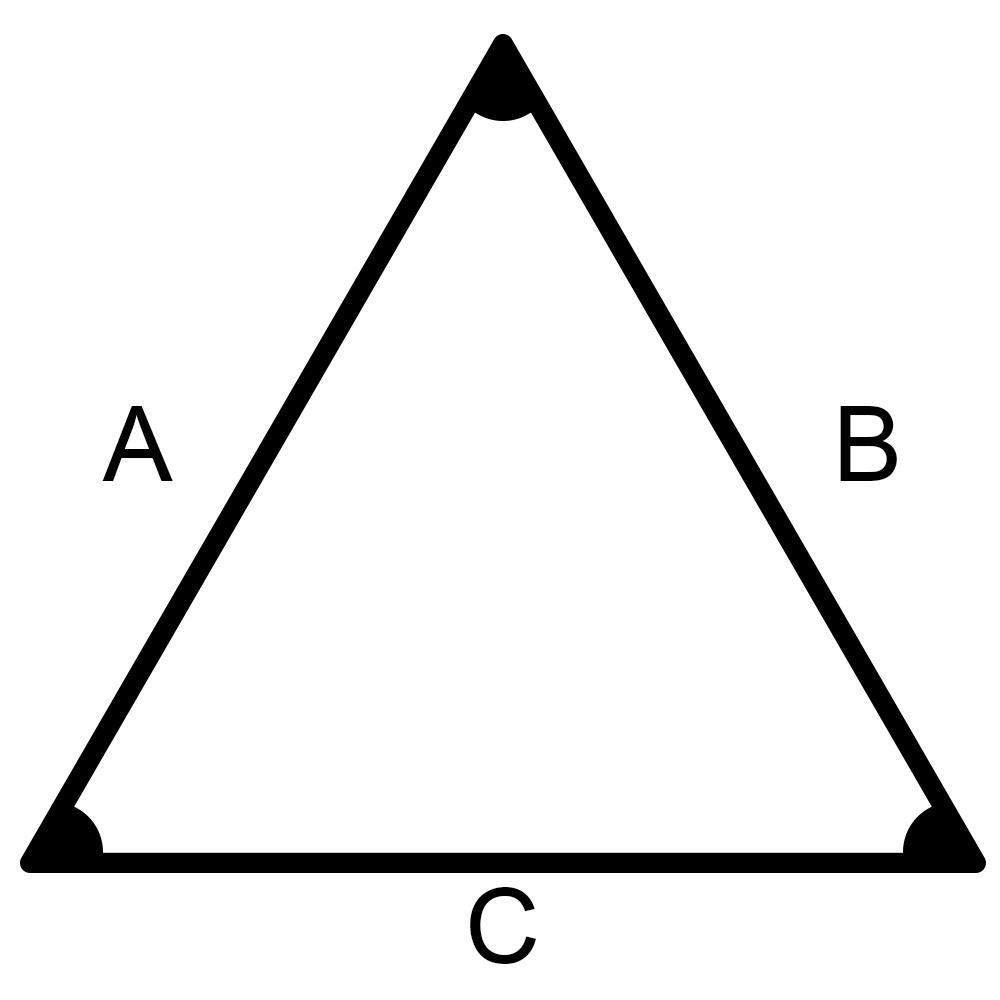
<style>
.page{position:relative;width:1000px;height:1000px;background:#ffffff}
.page>*{position:absolute;margin:0}
.t1{font:104.3px "ArialMT";color:#000000}
</style>
<div class="page">
<p class="t1" style="left:102px;top:406px;width:71px;height:75px">A</p>
<p class="t1" style="left:840px;top:406px;width:57px;height:75px">B</p>
<p class="t1" style="left:470px;top:887px;width:67px;height:77px">C</p>
</div>
